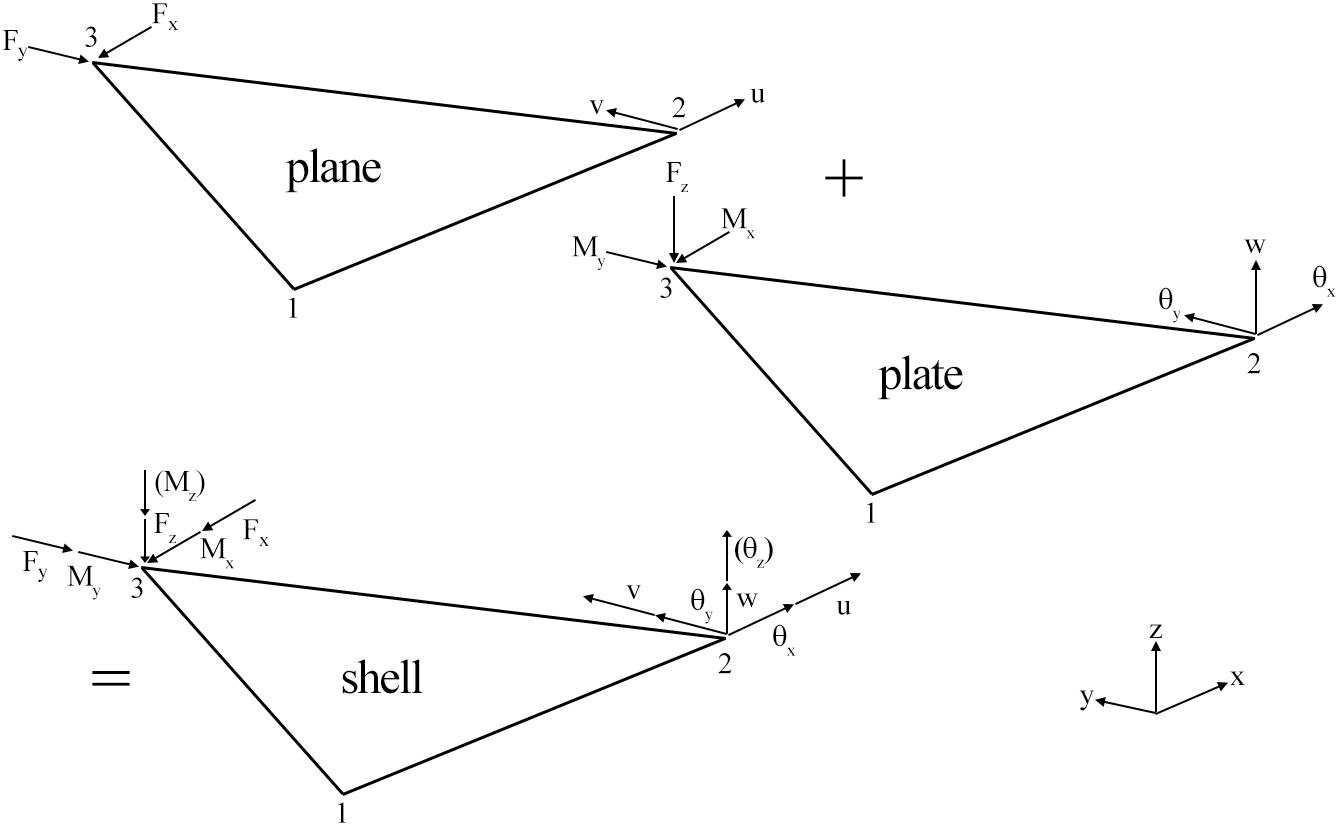
<style>
.page{position:relative;width:1340px;height:832px;background:#ffffff}
.page>*{position:absolute;margin:0}
.t1{font:30px "TimesNewRomanPSMT";letter-spacing:-0.04em;color:#000000}
.t2{font:20px "TimesNewRomanPSMT";letter-spacing:-0.04em;color:#000000}
.t3{font:48px "TimesNewRomanPSMT";letter-spacing:-0.04em;color:#000000}
.t4{font:72px "TimesNewRomanPSMT";letter-spacing:-0.04em;color:#000000}
.t5{font:29.9px "TimesNewRomanPSMT";letter-spacing:-0.04em;color:#000000}
</style>
<div class="page">
<p class="t1" style="left:152px;top:3px;width:15px;height:21px">F</p>
<p class="t1" style="left:2px;top:30px;width:16px;height:20px">F</p>
<p class="t1" style="left:85px;top:26px;width:12px;height:21px">3</p>
<p class="t2" style="left:168px;top:21px;width:10px;height:9px">x</p>
<p class="t2" style="left:18px;top:47px;width:10px;height:14px">y</p>
<p class="t1" style="left:750px;top:89px;width:15px;height:14px">u</p>
<p class="t1" style="left:589px;top:100px;width:15px;height:14px">v</p>
<p class="t1" style="left:672px;top:97px;width:14px;height:21px">2</p>
<p class="t3" style="left:285px;top:148px;width:96px;height:45px">plane</p>
<p class="t4" style="left:825px;top:159px;width:38px;height:38px">+</p>
<p class="t1" style="left:666px;top:162px;width:22px;height:30px">Fz</p>
<p class="t1" style="left:721px;top:208px;width:34px;height:31px">Mx</p>
<p class="t1" style="left:572px;top:236px;width:34px;height:34px">My</p>
<p class="t1" style="left:1244px;top:239px;width:22px;height:15px">w</p>
<p class="t1" style="left:660px;top:277px;width:12px;height:21px">3</p>
<p class="t1" style="left:289px;top:297px;width:8px;height:21px">1</p>
<p class="t1" style="left:1247px;top:353px;width:14px;height:21px">2</p>
<p class="t3" style="left:878px;top:355px;width:85px;height:45px">plate</p>
<p class="t1" style="left:155px;top:470px;width:50px;height:31px">(Mz)</p>
<p class="t1" style="left:867px;top:502px;width:8px;height:21px">1</p>
<p class="t1" style="left:154px;top:513px;width:22px;height:30px">Fz</p>
<p class="t1" style="left:243px;top:519px;width:15px;height:21px">F</p>
<p class="t1" style="left:200px;top:538px;width:34px;height:31px">Mx</p>
<p class="t2" style="left:259px;top:537px;width:10px;height:9px">x</p>
<p class="t1" style="left:22px;top:551px;width:16px;height:20px">F</p>
<p class="t2" style="left:38px;top:568px;width:10px;height:14px">y</p>
<p class="t5" style="left:67px;top:565px;width:34px;height:35px">My</p>
<p class="t1" style="left:131px;top:577px;width:12px;height:21px">3</p>
<p class="t1" style="left:626px;top:585px;width:15px;height:14px">v</p>
<p class="t1" style="left:736px;top:593px;width:22px;height:15px">w</p>
<p class="t1" style="left:836px;top:601px;width:15px;height:14px">u</p>
<p class="t1" style="left:1149px;top:624px;width:13px;height:14px">z</p>
<p class="t1" style="left:718px;top:653px;width:14px;height:21px">2</p>
<p class="t3" style="left:342px;top:659px;width:81px;height:35px">shell</p>
<p class="t4" style="left:92px;top:671px;width:38px;height:15px">=</p>
<p class="t1" style="left:1230px;top:671px;width:15px;height:14px">x</p>
<p class="t1" style="left:1079px;top:690px;width:15px;height:21px">y</p>
<p class="t1" style="left:338px;top:802px;width:8px;height:21px">1</p>
</div>
